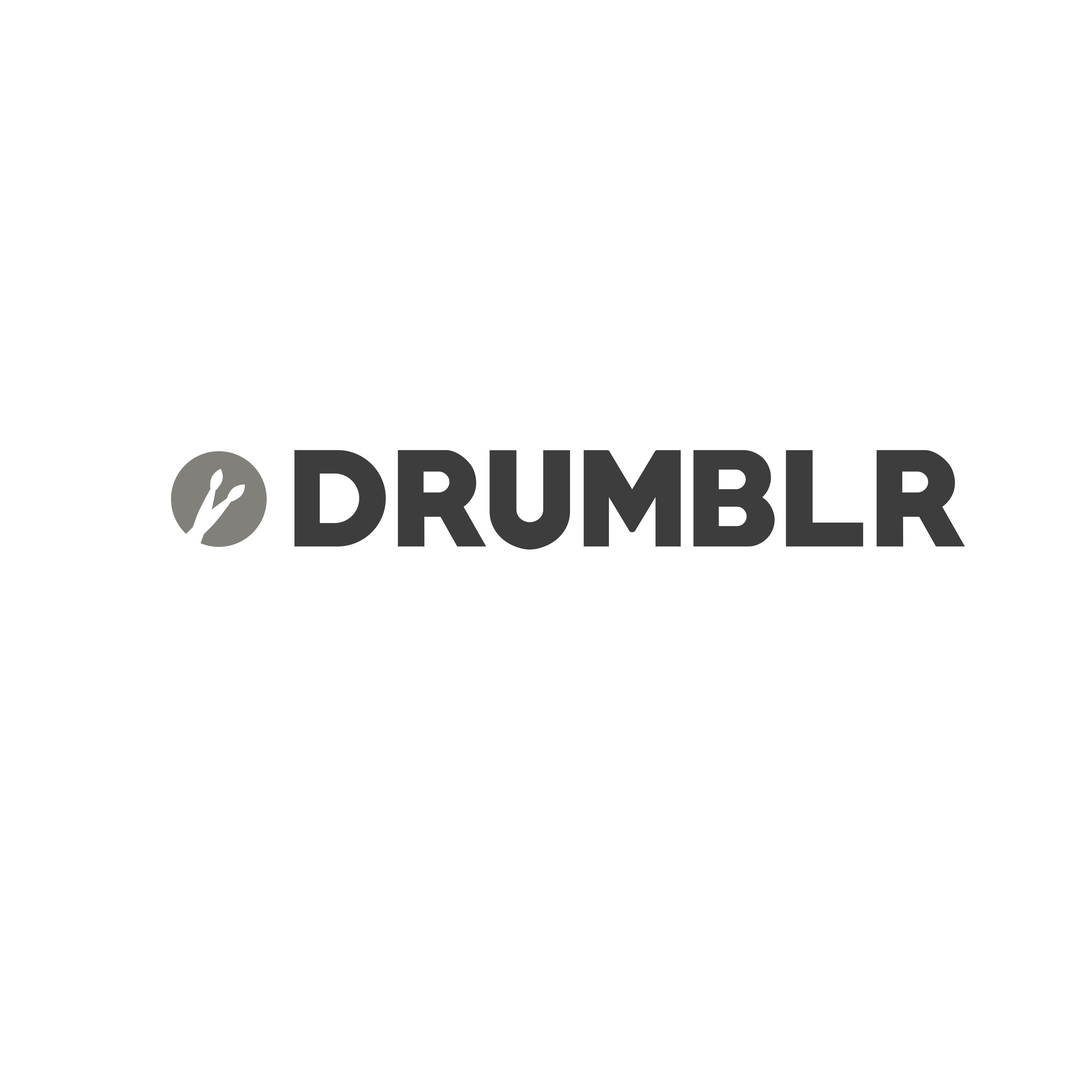
<style>
.page{position:relative;width:1092px;height:1092px;background:#ffffff}
.page>*{position:absolute;margin:0}
.t1{font:124px "PRIMETIME-Regular";color:#3d3d3d;font-weight:bold}
</style>
<div class="page">
<p class="t1" style="left:294px;top:450px;width:671px;height:100px">DRUMBLR</p>
</div>
